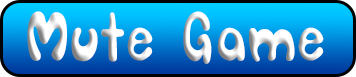
<style>
.page{position:relative;width:356px;height:77px}
.page>*{position:absolute;margin:0}
.t1{font:52px "SORRY_SORRY";letter-spacing:0.03em}
</style>
<div class="page">
<p class="t1" style="left:27px;top:11px;width:297px;height:53px">Mute Game</p>
</div>
